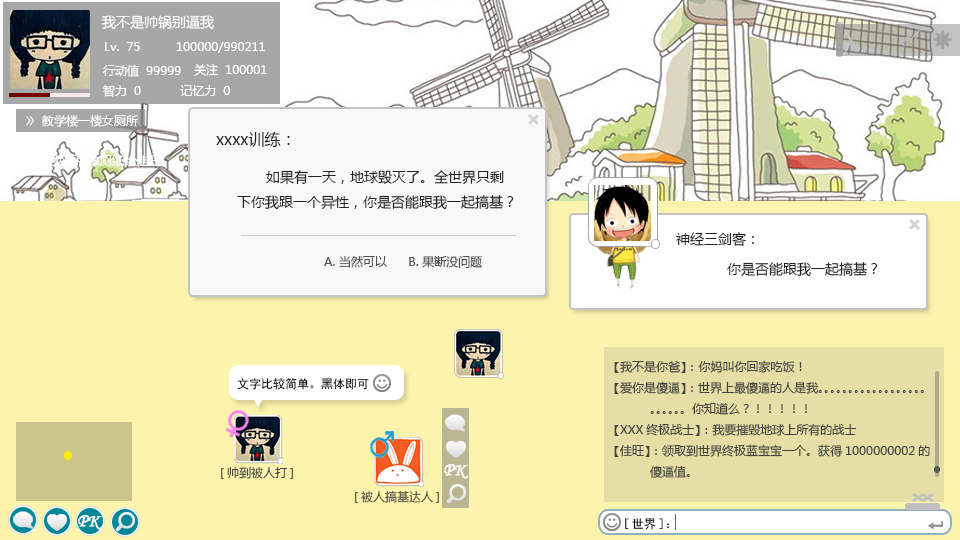
<style>
.page{position:relative;width:960px;height:540px;background:#fcf4ac}
.page>*{position:absolute;margin:0}
.t1{font:14px "MicrosoftYaHei";color:#ffffff}
.t2{font:12px "MicrosoftYaHei";color:#ffffff}
.t3{font:11.7px "MicrosoftYaHei";color:#ffffff}
.t4{font:16px "MicrosoftYaHei";color:#222222}
.t5{font:14px "MicrosoftYaHei";color:#222222}
.t6{font:12px "MicrosoftYaHei";color:#505050}
.t7{font:12px "MicrosoftYaHei";color:#434343}
.t8{font:12px "SimHei";color:#000000}
.t9{font:12px "MicrosoftYaHei";color:#494949}
.t10{font:18px "STLiti";color:#ffffff;font-weight:bold}
</style>
<div class="page">
<p class="t1" style="left:101px;top:15px;width:113px;height:15px">我不是帅锅别逼我</p>
<p class="t2" style="left:105px;top:42px;width:160px;height:11px">Lv.  75          100000/990211</p>
<p class="t2" style="left:103px;top:64px;width:78px;height:13px">行动值  99999</p>
<p class="t2" style="left:194px;top:64px;width:73px;height:12px">关注  100001</p>
<p class="t2" style="left:103px;top:84px;width:127px;height:13px">智力  0           记忆力  0</p>
<p class="t3" style="left:26px;top:116px;width:9px;height:10px;rotate:180deg">ㄍ</p>
<p class="t2" style="left:42px;top:114px;width:96px;height:13px">教学楼一楼女厕所</p>
<p class="t4" style="left:216px;top:131px;width:74px;height:17px">xxxx训练：</p>
<p class="t2" style="left:28px;top:154px;width:136px;height:13px">前往女厕所拿厕纸给佳旺。</p>
<p class="t5" style="left:237px;top:170px;width:277px;height:40px">如果有一天，地球毁灭了。全世界只剩<br>下你我跟一个异性，你是否能跟我一起搞基？</p>
<p class="t5" style="left:676px;top:232px;width:78px;height:14px">神经三剑客：</p>
<p class="t6" style="left:324px;top:255px;width:158px;height:13px">A. 当然可以      B. 果断没问题</p>
<p class="t5" style="left:727px;top:262px;width:151px;height:15px">你是否能跟我一起搞基？</p>
<p class="t7" style="left:614px;top:360px;width:316px;height:118px">【我不是你爸】： 你妈叫你回家吃饭！<br>【爱你是傻逼】：世界上最傻逼的人是我。。。。。。。。。。。。。。。。。。<br> 。。。。。。你知道么？！！！！！<br>【XXX终极战士】：我要摧毁地球上所有的战士<br>【佳旺】：领取到世界终极蓝宝宝一个。获得1000000002的<br> 傻逼值。</p>
<p class="t8" style="left:237px;top:378px;width:132px;height:12px">文字比较简单。黑体即可</p>
<p class="t9" style="left:221px;top:466px;width:72px;height:13px">[帅到被人打]</p>
<p class="t10" style="left:444px;top:464px;width:25px;height:15px">PK</p>
<p class="t9" style="left:355px;top:490px;width:84px;height:13px">[被人搞基达人]</p>
<p class="t10" style="left:78px;top:515px;width:25px;height:15px">PK</p>
<p class="t8" style="left:625px;top:518px;width:44px;height:12px">[世界]：</p>
</div>
